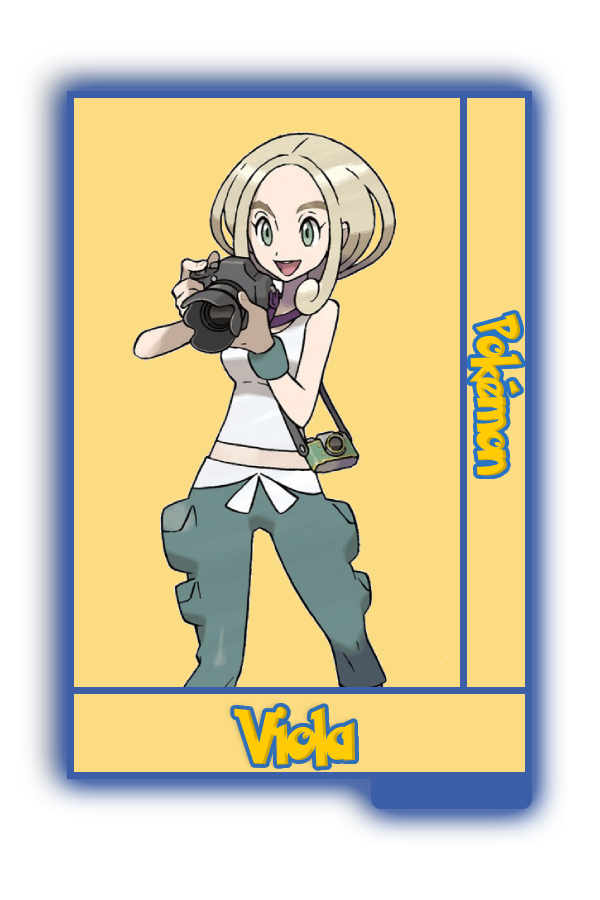
<style>
.page{position:relative;width:600px;height:900px;background:#fbdc83}
.page>*{position:absolute;margin:0}
.t1{font:48.8px "PokemonSolidNormal";color:#ffcb05;scale:0.8 1}
.t2{font:56.6px "PokemonSolidNormal";color:#ffcb05;scale:0.92 1}
</style>
<div class="page">
<p class="t1" style="left:469px;top:313px;width:54px;height:163px;rotate:90deg">Pokémon</p>
<p class="t2" style="left:234px;top:706px;width:122px;height:61px">Viola</p>
</div>
